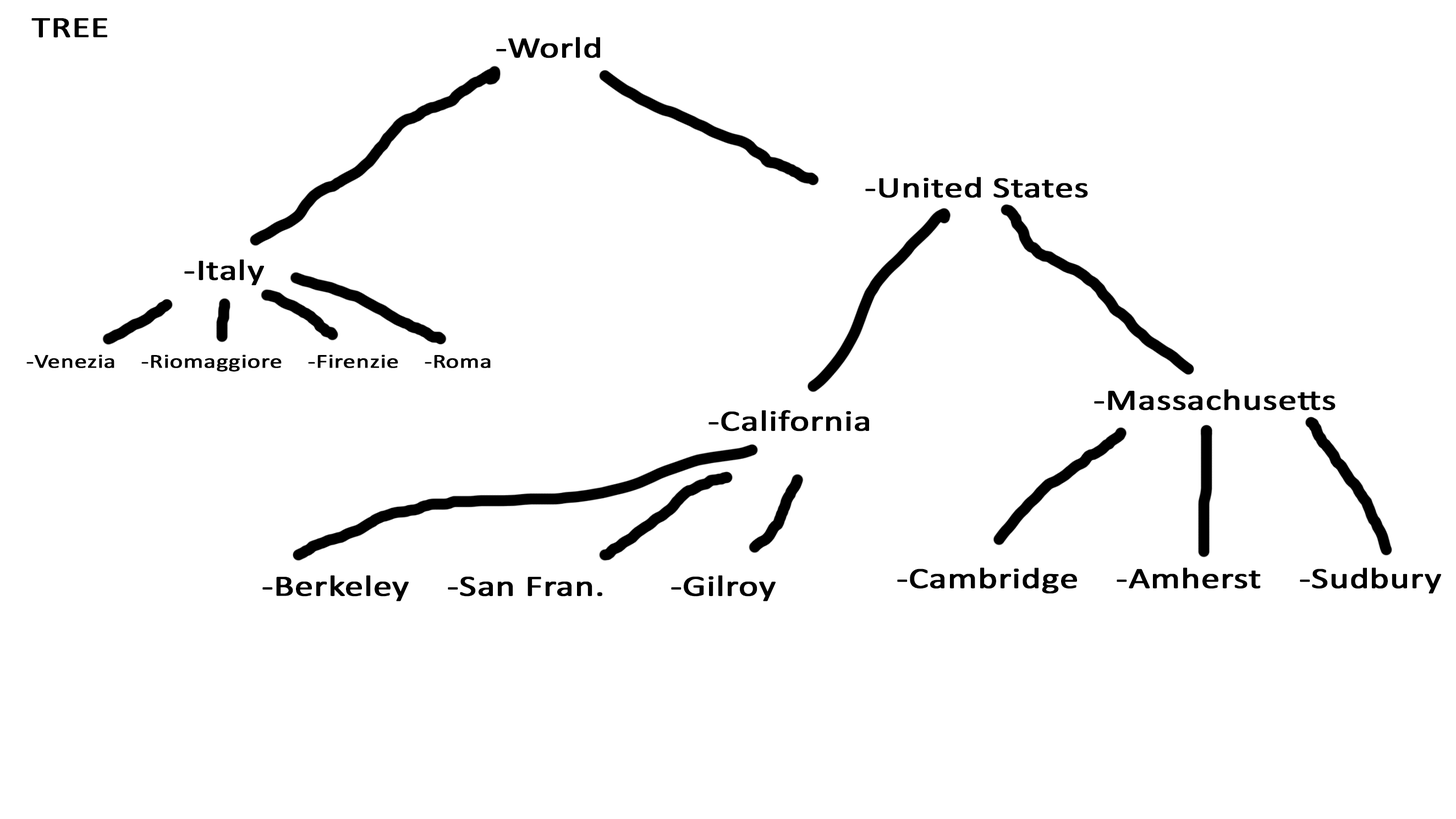
<style>
.page{position:relative;width:1456px;height:819px;background:#ffffff}
.page>*{position:absolute;margin:0}
.t1{font:29.7px "Calibri";color:#000000;font-weight:bold;scale:1.24 1}
.t2{font:20px "Calibri";color:#000000;font-weight:bold;scale:1.24 1}
</style>
<div class="page">
<p class="t1" style="left:31px;top:18px;width:76px;height:19px">TREE</p>
<p class="t1" style="left:496px;top:37px;width:104px;height:21px">-World</p>
<p class="t1" style="left:866px;top:177px;width:222px;height:21px">-United States</p>
<p class="t1" style="left:184px;top:259px;width:80px;height:27px">-Italy</p>
<p class="t2" style="left:26px;top:354px;width:465px;height:17px">-Venezia    -Riomaggiore    -Firenzie    -Roma</p>
<p class="t1" style="left:1094px;top:389px;width:242px;height:21px">-Massachusetts</p>
<p class="t1" style="left:709px;top:410px;width:160px;height:21px">-California</p>
<p class="t1" style="left:897px;top:567px;width:545px;height:27px">-Cambridge    -Amherst    -Sudbury</p>
<p class="t1" style="left:262px;top:575px;width:514px;height:26px">-Berkeley    -San Fran.       -Gilroy</p>
</div>
